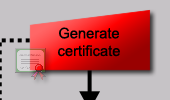
<style>
.page{position:relative;width:170px;height:100px;background:#c6c3c6}
.page>*{position:absolute;margin:0}
.t1{font:14.7px "ArialMT";color:#000000}
</style>
<div class="page">
<p class="t1" style="left:58px;top:27px;width:62px;height:30px;text-align:center">Generate<br>certificate</p>
</div>
